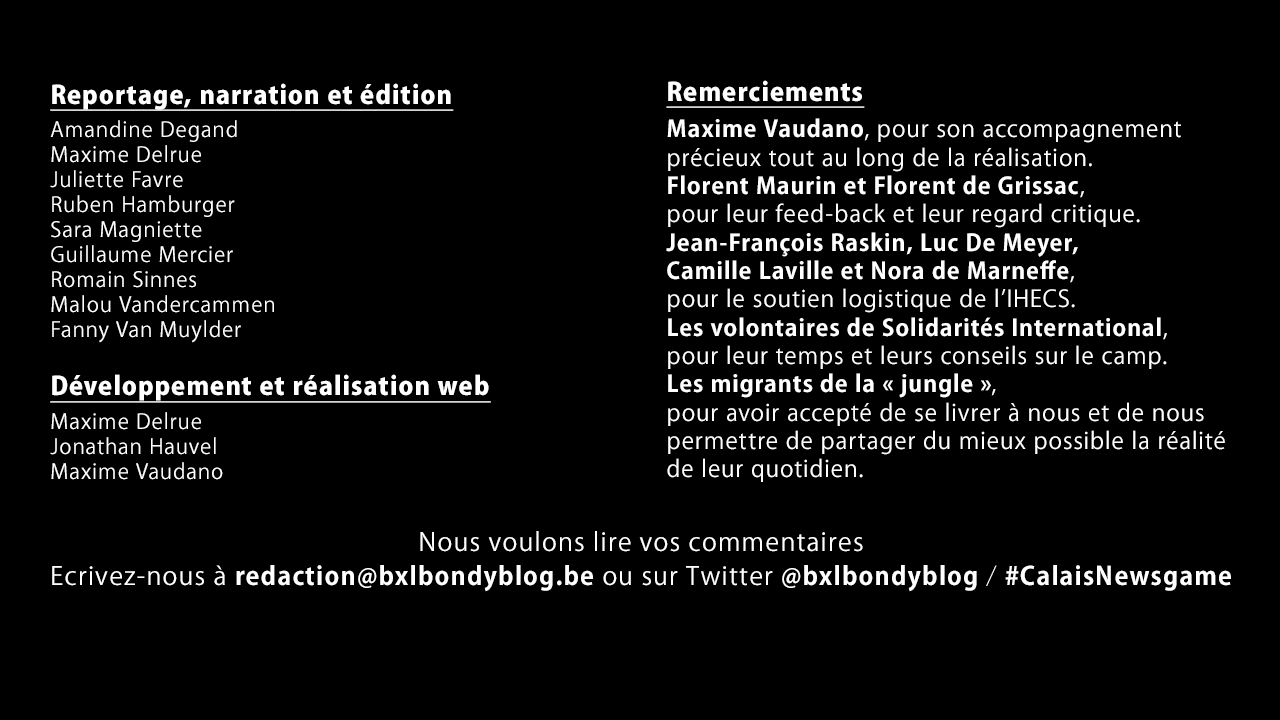
<style>
.page{position:relative;width:1280px;height:720px;background:#000000}
.page>*{position:absolute;margin:0}
.t1{font:20.8px/25px "KozGoPr6N-Regular";letter-spacing:0.05em;color:#ffffff}
.t2{font:25px/33.3px "KozGoPr6N-Heavy";letter-spacing:0.05em;color:#ffffff;text-decoration:underline}
.t3{font:22.9px/28.3px "KozGoPr6N-Regular";letter-spacing:0.05em;color:#ffffff}
.t4{font:22.9px/28.3px "KozGoPr6N-Bold";letter-spacing:0.05em;color:#ffffff}
.t5{font:25px/33.3px "KozGoPr6N-Regular";letter-spacing:0.05em;color:#ffffff}
.t6{font:25px/33.3px "KozGoPr6N-Bold";letter-spacing:0.05em;color:#ffffff}
.t7{font:25px/33.3px "KozGoPr6N-ExtraLight";letter-spacing:0.05em;color:#ffffff}
</style>
<div class="page">
<p class="t1" style="left:50px;top:83px;width:441px;height:397px"><span class="t2">Reportage, narration et édition<br><br></span>Amandine Degand<br>Maxime Delrue<br>Juliette Favre<br>Ruben Hamburger<br>Sara Magniette<br>Guillaume Mercier<br>Romain Sinnes<br>Malou Vandercammen<br>Fanny Van Muylder<br><br><span class="t2">Développement et réalisation web<br><br></span>Maxime Delrue<br>Jonathan Hauvel<br>Maxime Vaudano</p>
<p class="t3" style="left:666px;top:80px;width:559px;height:402px"><span class="t2">Remerciements<br><br></span><span class="t4">Maxime Vaudano</span>, pour son accompagnement <br>précieux tout au long de la réalisation.<br><span class="t4">Florent Maurin et Florent de Grissac</span>, <br>pour leur feed-back et leur regard critique.<br><span class="t4">Jean-François Raskin, Luc De Meyer, <br>Camille Laville et Nora de Marneffe</span>, <br>pour le soutien logistique de l’IHECS.<br><span class="t4">Les volontaires de Solidarités International</span>,<br>pour leur temps et leurs conseils sur le camp.<br><span class="t4">Les migrants de la « jungle »</span>, <br>pour avoir accepté de se livrer à nous et de nous permettre de partager du mieux possible la réalité <br>de leur quotidien.</p>
<p class="t5" style="left:52px;top:531px;width:1179px;height:61px;text-align:center">Nous voulons lire vos commentaires<br>Ecrivez-nous à <span class="t6">redaction@bxlbondyblog.be</span> ou sur Twitter <span class="t6">@bxlbondyblog</span><span class="t7"> / </span><span class="t6">#CalaisNewsgame</span></p>
</div>
